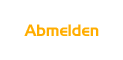
<style>
.page{position:relative;width:123px;height:60px;background:#ffffff}
.page>*{position:absolute;margin:0}
.t1{font:16px "AeroRegularSWFTE";color:#ffad00}
</style>
<div class="page">
<p class="t1" style="left:24px;top:24px;width:75px;height:12px">Abmelden</p>
</div>
